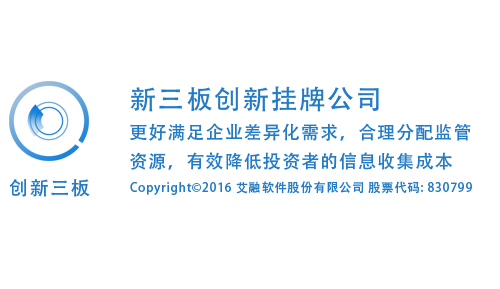
<style>
.page{position:relative;width:500px;height:289px;background:#ffffff}
.page>*{position:absolute;margin:0}
.t1{font:26.7px "AdobeHeitiStd-Regular";letter-spacing:0.06em;color:#237bc5}
.t2{font:18px/29.3px "AdobeHeitiStd-Regular";letter-spacing:0.06em;color:#237bc5}
.t3{font:19.4px "AdobeHeitiStd-Regular";letter-spacing:0.06em;color:#237bc5}
.t4{font:12.2px "AdobeHeitiStd-Regular";letter-spacing:0.06em;color:#237bc5}
</style>
<div class="page">
<p class="t1" style="left:130px;top:86px;width:249px;height:26px">新三板创新挂牌公司</p>
<p class="t2" style="left:130px;top:123px;width:341px;height:47px">更好满足企业差异化需求，合理分配监管<br>资源，有效降低投资者的信息收集成本</p>
<p class="t3" style="left:9px;top:179px;width:81px;height:18px">创新三板</p>
<p class="t4" style="left:130px;top:181px;width:342px;height:14px">Copyright©2016 艾融软件股份有限公司 股票代码: 830799</p>
</div>
